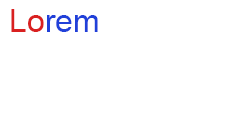
<style>
.page{position:relative;width:240px;height:120px;background:#ffffff}
.page>*{position:absolute;margin:0}
.t1{font:32px "ArialMT";color:#2040d9}
.t2{font:32px "ArialMT";color:#d92020}
</style>
<div class="page">
<p class="t1" style="left:11px;top:9px;width:87px;height:23px"><span class="t2">Lo</span>rem</p>
</div>
